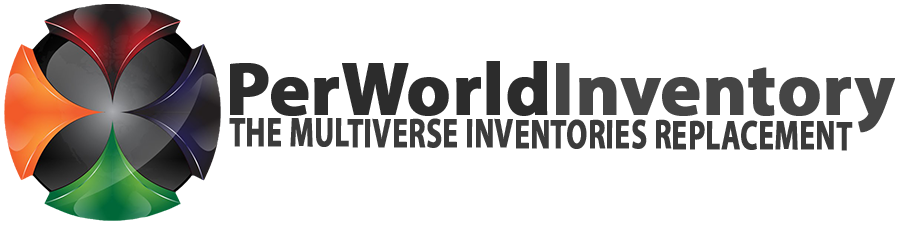
<style>
.page{position:relative;width:900px;height:225px;background:#ffffff}
.page>*{position:absolute;margin:0}
.t1{font:75px "MyriadPro-Bold";color:#454545;font-weight:bold}
.t2{font:75px "MyriadPro-Bold";color:#2c2c2c;font-weight:bold}
.t3{font:41.7px "MyriadPro-Bold";color:#3b3b3b;font-weight:bold;scale:0.69 1}
</style>
<div class="page">
<p class="t1" style="left:230px;top:61px;width:665px;height:72px"><span class="t2">PerWorld</span>Inventory</p>
<p class="t3" style="left:229px;top:118px;width:624px;height:33px">THE MULTIVERSE INVENTORIES REPLACEMENT</p>
</div>
